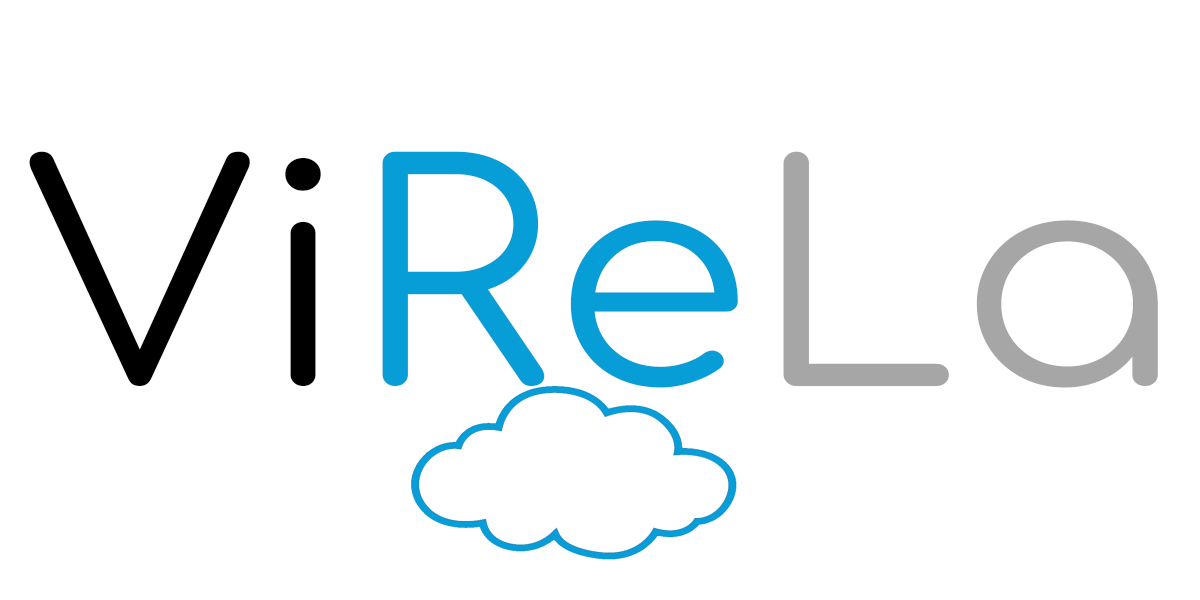
<style>
.page{position:relative;width:1200px;height:600px;background:#ffffff}
.page>*{position:absolute;margin:0}
.t1{font:300px "Comfortaa-Regular";color:#000000;scale:1.08 1}
.t2{font:300px "Comfortaa-Regular";color:#079ed8;scale:1.08 1}
.t3{font:300px "Comfortaa-Regular";color:#a7a6a6;scale:1.08 1}
</style>
<div class="page">
<p class="t1" style="left:29px;top:151px;width:1129px;height:237px">Vi<span class="t2">Re</span><span class="t3">La</span></p>
</div>
